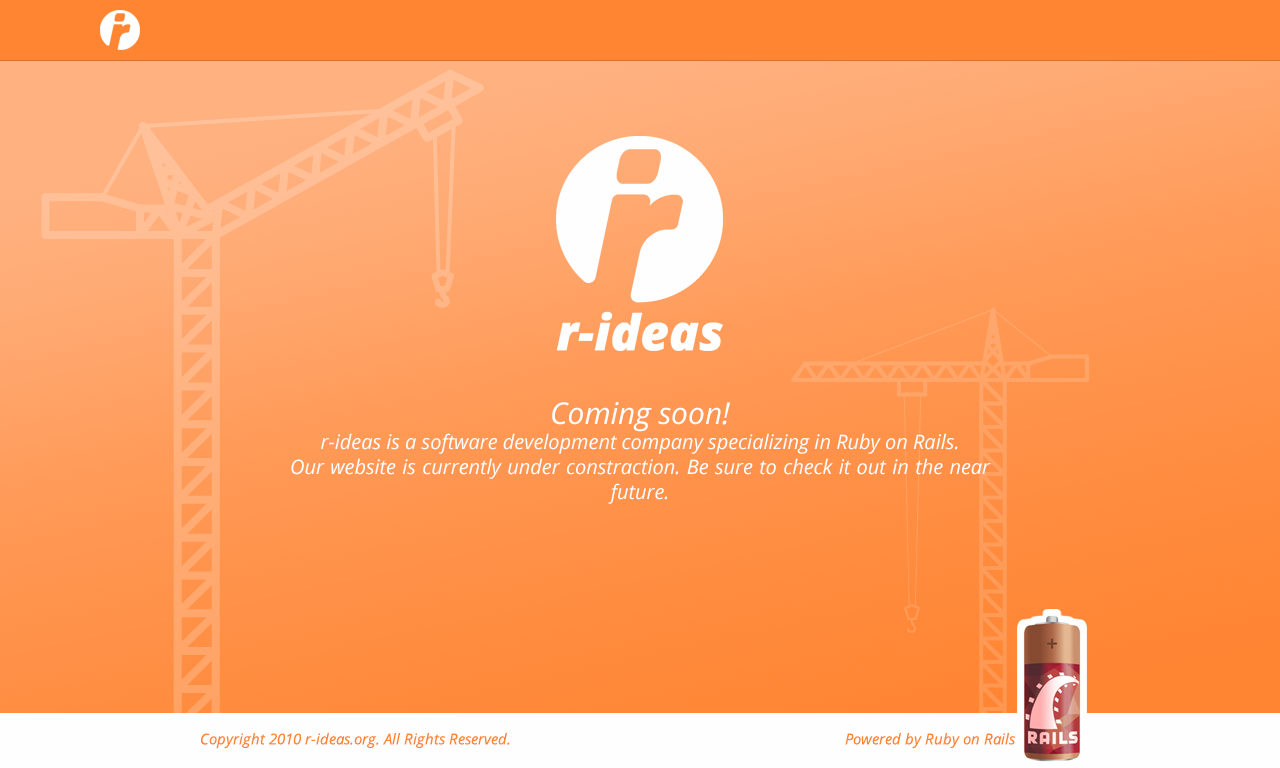
<style>
.page{position:relative;width:1280px;height:768px}
.page>*{position:absolute;margin:0}
.t1{font:20px/25px "OpenSans-Italic";color:#fefefe}
.t2{font:30px/25px "OpenSans-Italic";color:#fefefe}
.t3{font:15px "OpenSans-Italic";color:#ff8533}
</style>
<div class="page">
<p class="t1" style="left:291px;top:402px;width:700px;height:102px;text-align:justify"><span class="t2">Coming soon!<br></span>r-ideas is a software development company specializing in Ruby on Rails.<br>Our website is currently under constraction. Be sure to check it out in the near future.</p>
<p class="t3" style="left:201px;top:733px;width:309px;height:16px">Copyright 2010 r-ideas.org. All Rights Reserved.</p>
<p class="t3" style="left:845px;top:733px;width:171px;height:16px">Powered by Ruby on Rails</p>
</div>
